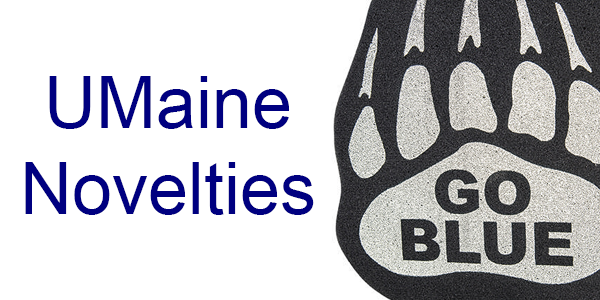
<style>
.page{position:relative;width:600px;height:300px;background:#ffffff}
.page>*{position:absolute;margin:0}
.t1{font:72px "ArialMT";color:#000080}
</style>
<div class="page">
<p class="t1" style="left:25px;top:76px;width:289px;height:139px;text-align:center">UMaine<br>Novelties</p>
</div>
